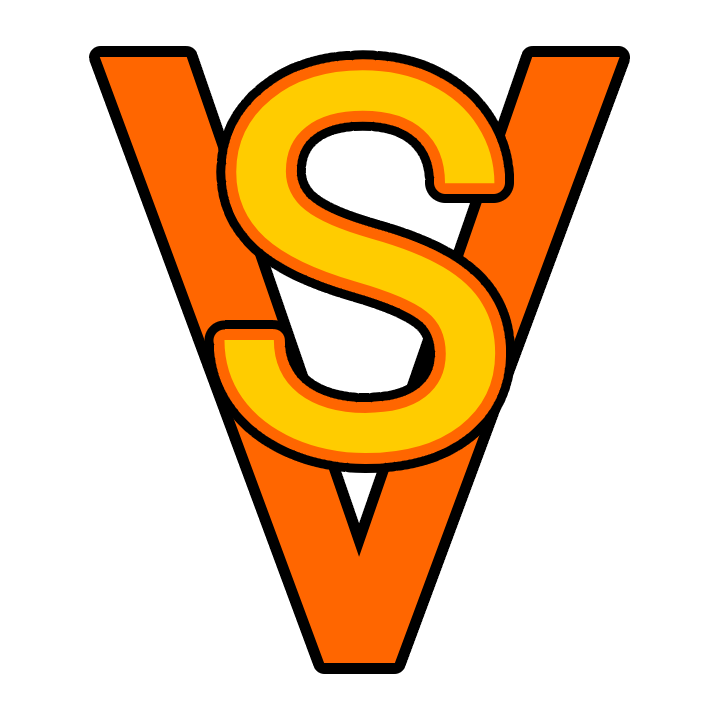
<style>
.page{position:relative;width:720px;height:720px;background:#ffffff}
.page>*{position:absolute;margin:0}
.t1{font:852.4px "Roboto-Regular";color:#ff6600}
.t2{font:524px "Roboto-Regular";color:#ffcc00}
</style>
<div class="page">
<p class="t1" style="left:99px;top:57px;width:521px;height:606px">V</p>
<p class="t2" style="left:224px;top:70px;width:272px;height:383px">S</p>
</div>
